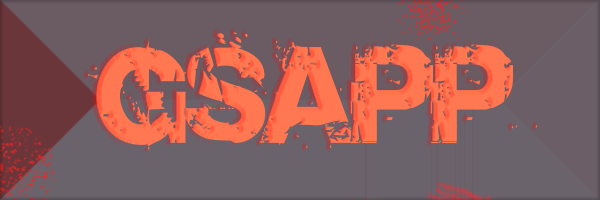
<style>
.page{position:relative;width:600px;height:200px;background:#6b636b}
.page>*{position:absolute;margin:0}
.t1{font:121.9px "Base02";color:#ff7851}
</style>
<div class="page">
<p class="t1" style="left:88px;top:32px;width:450px;height:118px">GSapp</p>
</div>
